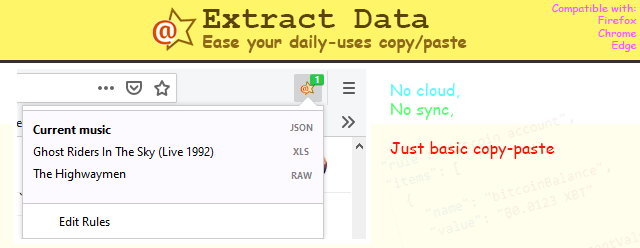
<style>
.page{position:relative;width:640px;height:248px;background:#ffffff}
.page>*{position:absolute;margin:0}
.t1{font:10.4px "ComicSansMS";color:#f958ff;scale:1.05 1}
.t2{font:31.6px "CourierNewPS-BoldMT";color:#5b440b}
.t3{font:16.8px "ComicSansMS-Bold";color:#8e6917}
.t4{font:16.1px "ComicSansMS";color:#ff1206}
.t5{font:16.1px "ComicSansMS";color:#58fcff}
.t6{font:16.1px "ComicSansMS";color:#58ff74}
</style>
<div class="page">
<p class="t1" style="left:552px;top:4px;width:85px;height:48px;text-align:right">Compatible with:<br>Firefox<br>Chrome<br>Edge</p>
<p class="t2" style="left:202px;top:9px;width:227px;height:19px">Extract Data</p>
<p class="t3" style="left:203px;top:35px;width:264px;height:18px">Ease your daily-uses copy/paste</p>
<p class="t4" style="left:390px;top:83px;width:165px;height:76px"><span class="t5">No cloud,<br></span><span class="t6">No sync,<br><br></span>Just basic copy-paste</p>
</div>
